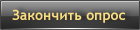
<style>
.page{position:relative;width:140px;height:30px}
.page>*{position:absolute;margin:0}
.t1{font:14px "TrebuchetMS-Bold";color:#fbdd81}
</style>
<div class="page">
<p class="t1" style="left:12px;top:9px;width:114px;height:14px">Закончить опрос</p>
</div>
